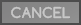
<style>
.page{position:relative;width:81px;height:25px}
.page>*{position:absolute;margin:0}
.t1{font:14px "Comfortaa-Bold";letter-spacing:0.04em;color:#c8c8c8}
</style>
<div class="page">
<p class="t1" style="left:11px;top:6px;width:59px;height:13px">CANCEL</p>
</div>
